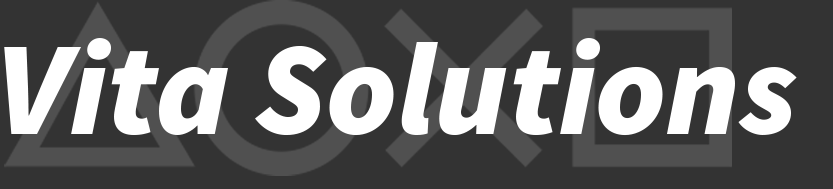
<style>
.page{position:relative;width:833px;height:189px;background:#333333}
.page>*{position:absolute;margin:0}
.t1{font:132px "SourceSansPro-BlackIt";color:#ffffff}
</style>
<div class="page">
<p class="t1" style="left:4px;top:38px;width:793px;height:98px">Vita Solutions</p>
</div>
